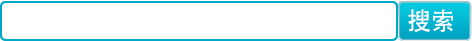
<style>
.page{position:relative;width:472px;height:41px;background:#ffffff}
.page>*{position:absolute;margin:0}
.t1{font:24px "AdobeHeitiStd-Regular";color:#fdffff;text-transform:uppercase}
</style>
<div class="page">
<p class="t1" style="left:408px;top:9px;width:45px;height:23px">搜索</p>
</div>
